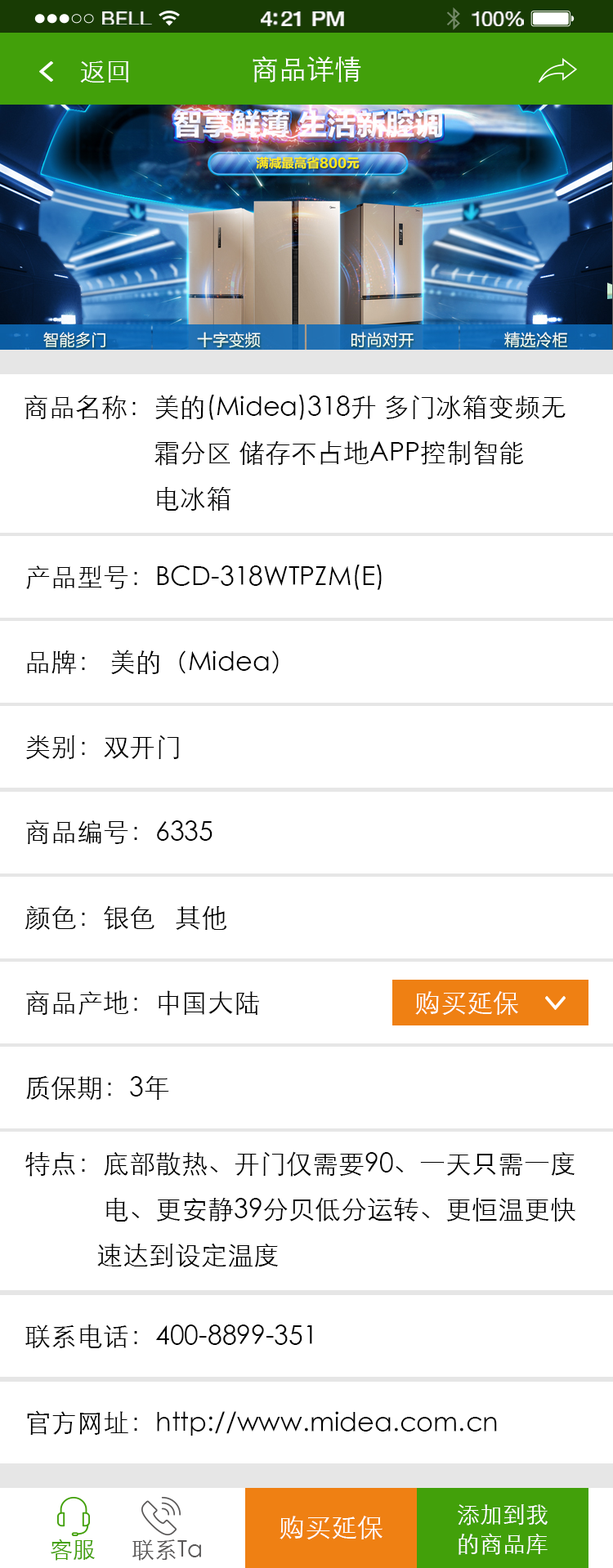
<style>
.page{position:relative;width:613px;height:1568px;background:#ffffff}
.page>*{position:absolute;margin:0}
.t1{font:19px "HelveticaNeue";letter-spacing:0.02em;color:#ffffff;scale:1.06 1}
.t2{font:20.7px "HelveticaNeue-Medium";letter-spacing:-0.02em;color:#ffffff;scale:1.06 1}
.t3{font:19.8px "HelveticaNeue";letter-spacing:-0.02em;color:#ffffff;scale:1.06 1}
.t4{font:26.1px "STXihei";color:#ffffff}
.t5{font:27.8px "STXihei";color:#ffffff}
.t6{font:26.1px/45.8px "STXihei";color:#000000}
.t7{font:26.1px "STXihei";color:#000000}
.t8{font:22.9px/29.4px "STXihei";color:#fffefe}
.t9{font:26.1px "STXihei";color:#fffefe}
.t10{font:22.9px "STXihei";color:#42a00a}
.t11{font:22.9px "STXihei";color:#595757}
</style>
<div class="page">
<p class="t1" style="left:102px;top:11px;width:50px;height:14px">BELL</p>
<p class="t2" style="left:261px;top:11px;width:83px;height:15px">4:21 PM</p>
<p class="t3" style="left:471px;top:11px;width:53px;height:15px">100%</p>
<p class="t4" style="left:80px;top:60px;width:48px;height:23px">返回</p>
<p class="t5" style="left:252px;top:56px;width:109px;height:27px">商品详情</p>
<p class="t6" style="left:25px;top:395px;width:540px;height:116px">商品名称：美的(Midea)318升 多门冰箱变频无<br>                    霜分区 储存不占地APP控制智能<br>                    电冰箱</p>
<p class="t7" style="left:26px;top:565px;width:356px;height:25px">产品型号：BCD-318WTPZM(E)</p>
<p class="t7" style="left:27px;top:650px;width:252px;height:25px">品牌： 美的（Midea）</p>
<p class="t7" style="left:26px;top:735px;width:153px;height:25px">类别：双开门</p>
<p class="t7" style="left:26px;top:820px;width:186px;height:24px">商品编号：6335</p>
<p class="t7" style="left:25px;top:905px;width:202px;height:26px">颜色：银色   其他</p>
<p class="t7" style="left:26px;top:990px;width:233px;height:26px">商品产地：中国大陆</p>
<p class="t4" style="left:415px;top:991px;width:103px;height:24px">购买延保</p>
<p class="t7" style="left:26px;top:1075px;width:143px;height:25px">质保期：3年</p>
<p class="t6" style="left:25px;top:1151px;width:550px;height:116px">特点：底部散热、开门仅需要90、一天只需一度<br>            电、更安静39分贝低分运转、更恒温更快<br>           速达到设定温度</p>
<p class="t7" style="left:25px;top:1324px;width:287px;height:24px">联系电话：400-8899-351</p>
<p class="t7" style="left:27px;top:1410px;width:470px;height:26px">官方网址：http://www.midea.com.cn</p>
<p class="t8" style="left:458px;top:1504px;width:89px;height:51px">添加到我<br>的商品库</p>
<p class="t9" style="left:279px;top:1516px;width:103px;height:23px">购买延保</p>
<p class="t10" style="left:51px;top:1539px;width:44px;height:22px">客服</p>
<p class="t11" style="left:132px;top:1539px;width:69px;height:22px">联系Ta</p>
</div>
